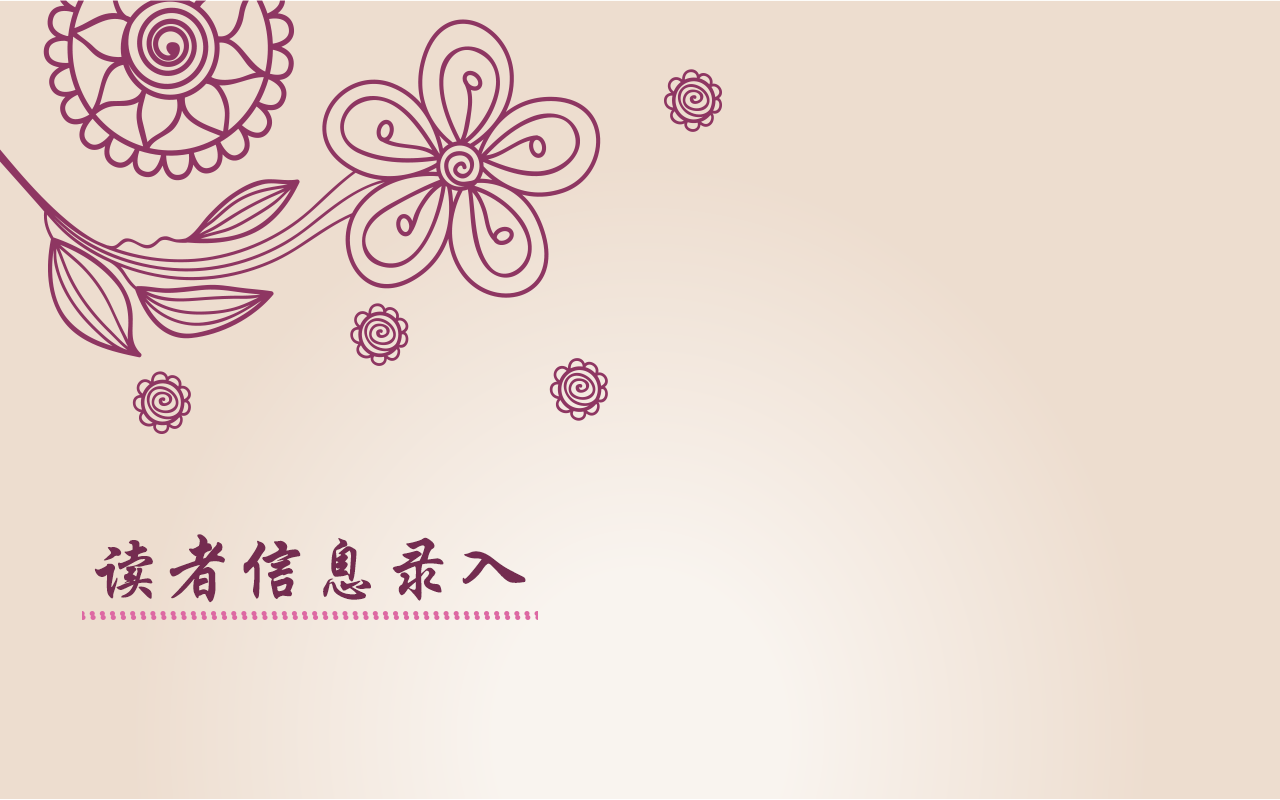
<style>
.page{position:relative;width:1280px;height:800px;background:#edddcf}
.page>*{position:absolute;margin:0}
.t1{font:73px "STXingkai";color:#742c50}
</style>
<div class="page">
<p class="t1" style="left:94px;top:534px;width:432px;height:69px">读者信息录入</p>
</div>
